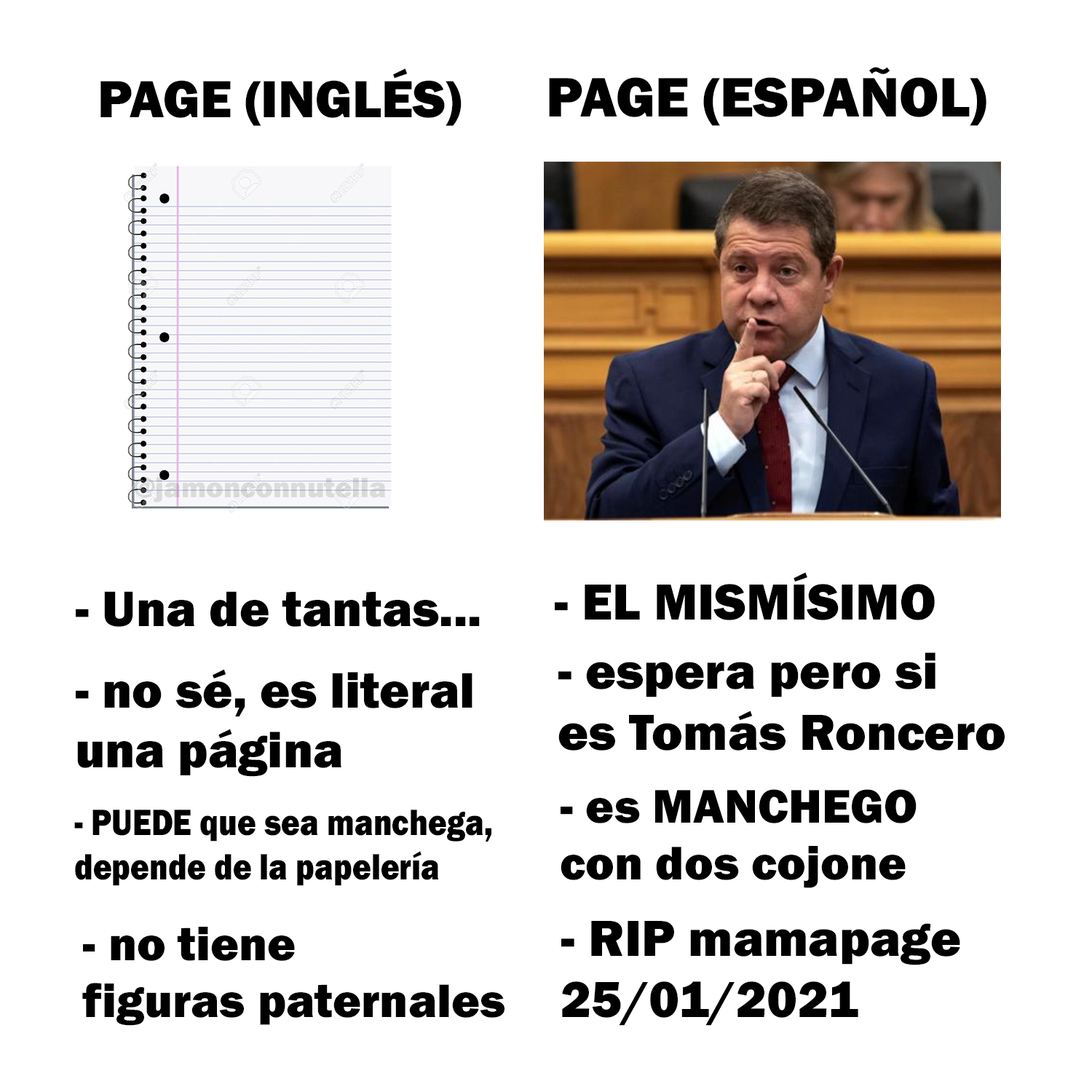
<style>
.page{position:relative;width:1092px;height:1092px;background:#ffffff}
.page>*{position:absolute;margin:0}
.t1{font:54.1px "FranklinGothic-Heavy";color:#000000}
.t2{font:57.5px "FranklinGothic-Heavy";color:#000000}
.t3{font:29.1px "FranklinGothic-Heavy";color:#dbdbdc}
.t4{font:52.4px "FranklinGothic-Heavy";color:#000000}
.t5{font:51.5px "FranklinGothic-Heavy";color:#000000}
.t6{font:51.4px "FranklinGothic-Heavy";color:#000000}
.t7{font:48.8px "FranklinGothic-Heavy";color:#000000}
.t8{font:38.1px "FranklinGothic-Heavy";color:#000000;scale:0.84 1}
.t9{font:48.7px "FranklinGothic-Heavy";color:#000000}
</style>
<div class="page">
<p class="t1" style="left:100px;top:68px;width:362px;height:58px">PAGE (INGLÉS)</p>
<p class="t2" style="left:549px;top:67px;width:437px;height:59px">PAGE (ESPAÑOL)</p>
<p class="t3" style="left:134px;top:477px;width:251px;height:25px">@jamonconnutella</p>
<p class="t4" style="left:555px;top:572px;width:380px;height:48px">- EL MISMÍSIMO</p>
<p class="t5" style="left:76px;top:591px;width:404px;height:36px">- Una de tantas...</p>
<p class="t4" style="left:558px;top:652px;width:447px;height:99px">- espera pero si<br>es Tomás Roncero</p>
<p class="t6" style="left:76px;top:669px;width:396px;height:108px">- no sé, es literal<br>una página</p>
<p class="t7" style="left:561px;top:789px;width:356px;height:99px">- es MANCHEGO<br>con dos cojone</p>
<p class="t8" style="left:74px;top:810px;width:417px;height:76px">- PUEDE que sea manchega,<br>depende de la papelería</p>
<p class="t9" style="left:82px;top:927px;width:422px;height:99px">- no tiene<br>figuras paternales</p>
<p class="t4" style="left:561px;top:921px;width:399px;height:105px">- RIP mamapage<br>25/01/2021</p>
</div>
